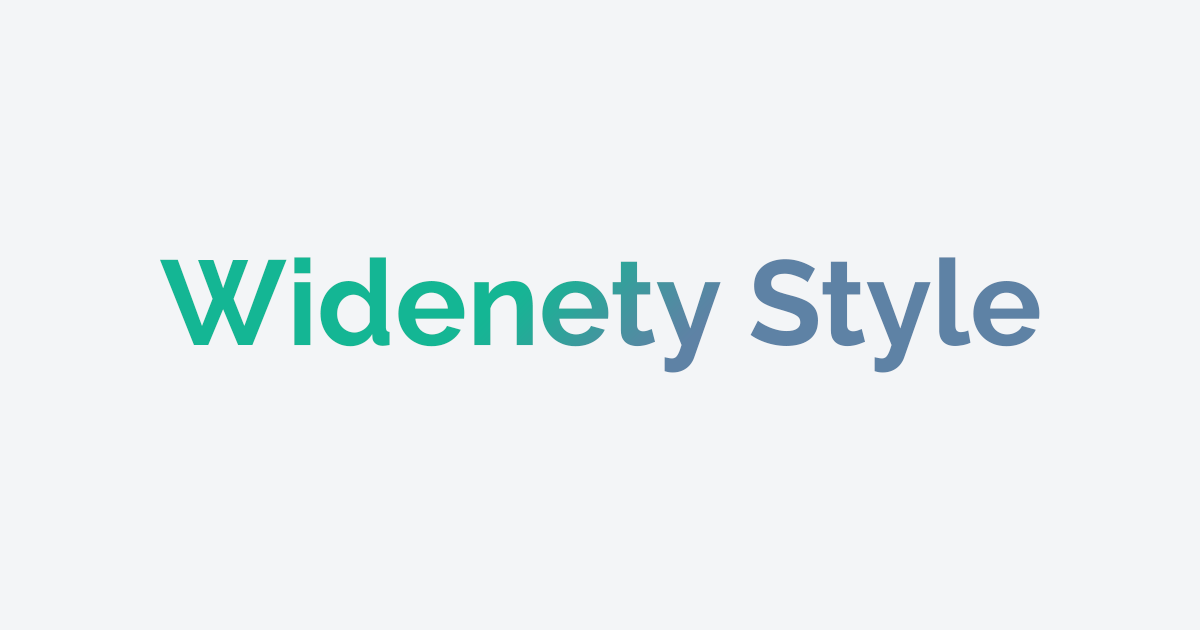
<style>
.page{position:relative;width:1200px;height:630px;background:#f3f5f7}
.page>*{position:absolute;margin:0}
.t1{font:120px "Raleway-Bold"}
</style>
<div class="page">
<p class="t1" style="left:160px;top:257px;width:880px;height:116px">Widenety Style</p>
</div>
